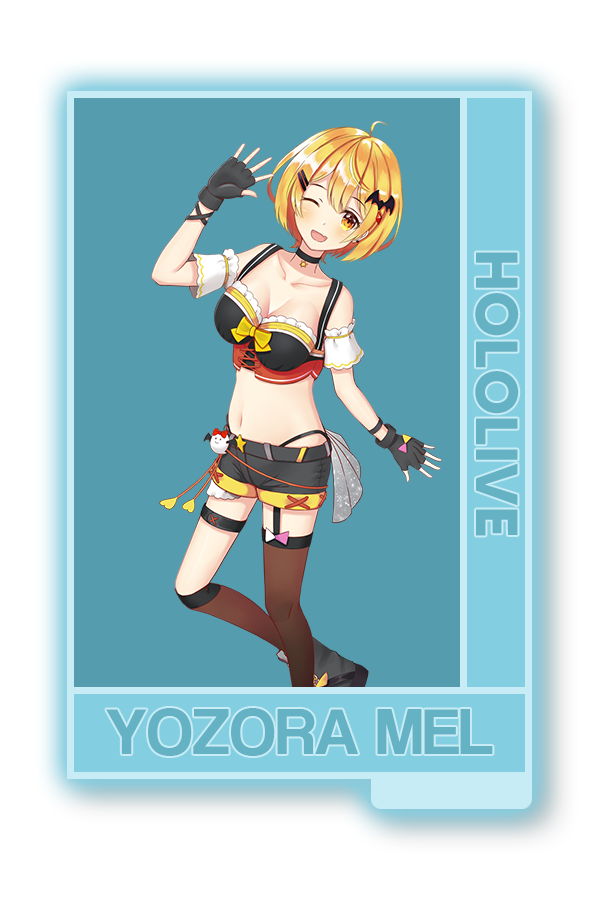
<style>
.page{position:relative;width:600px;height:900px;background:#549cae}
.page>*{position:absolute;margin:0}
.t1{font:59.2px "MADETOMMY-Bold";color:#66b2c5}
.t2{font:68.4px "CoolveticaRg-Regular";color:#66b2c5}
</style>
<div class="page">
<p class="t1" style="left:475px;top:252px;width:44px;height:284px;rotate:90deg">HOLOLIVE</p>
<p class="t2" style="left:106px;top:708px;width:387px;height:48px">YOZORA MEL</p>
</div>
